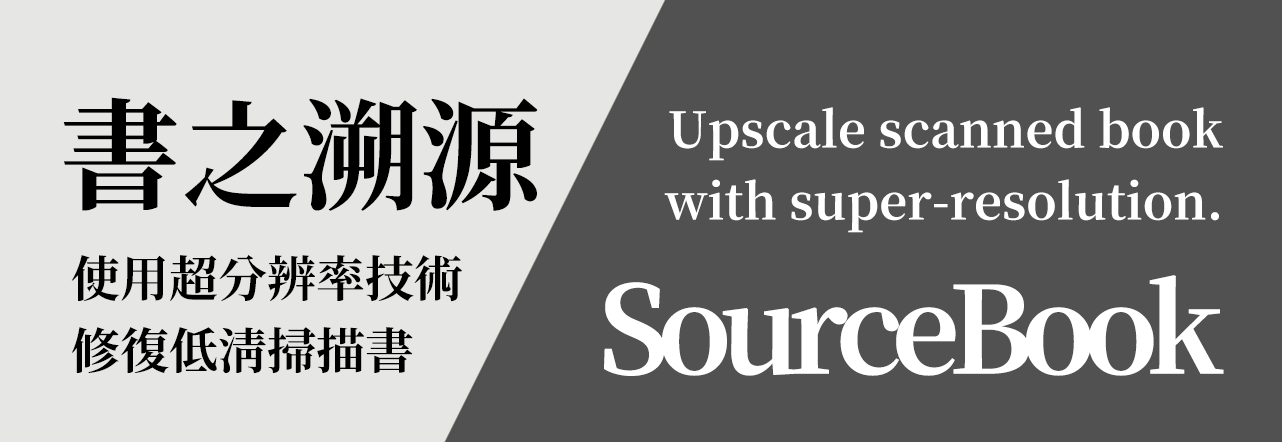
<style>
.page{position:relative;width:1282px;height:442px;background:#515151}
.page>*{position:absolute;margin:0}
.t1{font:120px "GenYoMinJP-B";color:#000000}
.t2{font:49px/72px "GenYoMinTW-B";color:#ffffff}
.t3{font:49px/72px "GenYoMinTW-B";color:#000000}
.t4{font:120px "GenYoMinJP-B";letter-spacing:-0.1em;color:#ffffff}
</style>
<div class="page">
<p class="t1" style="left:63px;top:97px;width:475px;height:114px">書之溯源</p>
<p class="t2" style="left:664px;top:107px;width:559px;height:126px;text-align:right">Upscale scanned book<br>with super-resolution.</p>
<p class="t3" style="left:71px;top:255px;width:391px;height:119px">使用超分辨率技術<br>修復低清掃描書</p>
<p class="t4" style="left:604px;top:275px;width:620px;height:101px">SourceBook</p>
</div>
